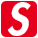
<style>
.page{position:relative;width:38px;height:38px;background:#e6001c}
.page>*{position:absolute;margin:0}
.t1{font:42px "Futura-HeavyOblique";color:#ffffff}
</style>
<div class="page">
<p class="t1" style="left:7px;top:2px;width:24px;height:34px">S</p>
</div>
